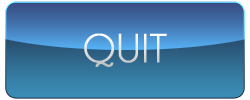
<style>
.page{position:relative;width:250px;height:100px}
.page>*{position:absolute;margin:0}
.t1{font:36px "CaviarDreams";text-transform:uppercase;font-weight:bold}
</style>
<div class="page">
<p class="t1" style="left:84px;top:33px;width:83px;height:34px">Quit</p>
</div>
